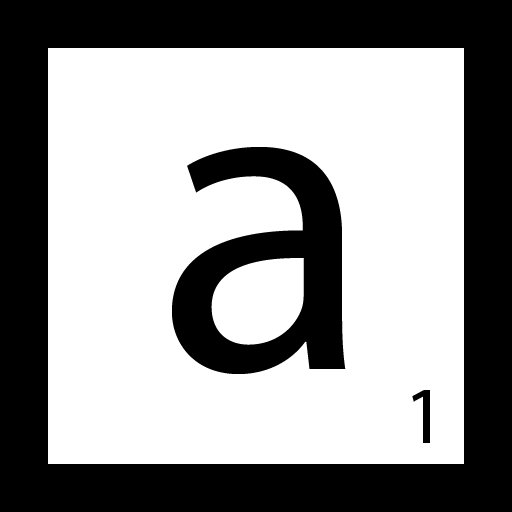
<style>
.page{position:relative;width:512px;height:512px;background:#ffffff}
.page>*{position:absolute;margin:0}
.t1{font:450px "MyriadPro-Regular";color:#000000}
.t2{font:81px "MyriadPro-Regular";color:#000000}
</style>
<div class="page">
<p class="t1" style="left:172px;top:147px;width:174px;height:227px">a</p>
<p class="t2" style="left:412px;top:390px;width:18px;height:53px">1</p>
</div>
